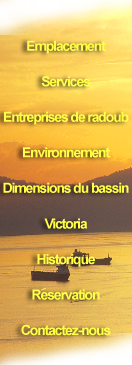
<style>
.page{position:relative;width:132px;height:365px}
.page>*{position:absolute;margin:0}
.t1{font:13.8px/35.6px "Arial-BoldMT";letter-spacing:-0.075em;color:#ffff4c}
</style>
<div class="page">
<p class="t1" style="left:3px;top:40px;width:126px;height:296px;text-align:center">Emplacement<br>Services<br>Entreprises de radoub<br>Environnement<br>Dimensions du bassin<br>Victoria<br>Historique<br>Reservation<br>Contactez-nous</p>
</div>
